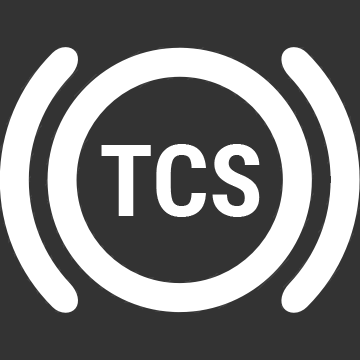
<style>
.page{position:relative;width:360px;height:360px;background:#333333}
.page>*{position:absolute;margin:0}
.t1{font:100px "RobotoCondensed-Bold";color:#ffffff}
</style>
<div class="page">
<p class="t1" style="left:101px;top:144px;width:159px;height:73px">TCS</p>
</div>
